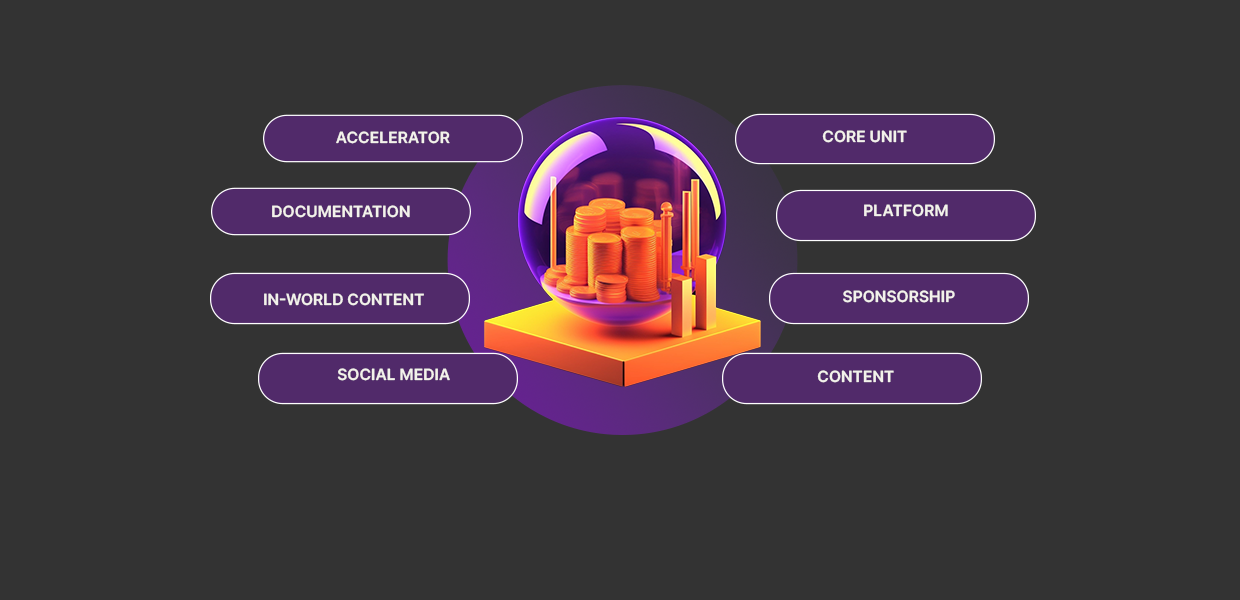
<style>
.page{position:relative;width:1240px;height:600px;background:#333333}
.page>*{position:absolute;margin:0}
.t1{font:15.4px "Inter-SemiBold";color:#f3f2eb;text-transform:uppercase}
</style>
<div class="page">
<p class="t1" style="left:336px;top:131px;width:114px;height:13px">Accelerator</p>
<p class="t1" style="left:822px;top:130px;width:85px;height:13px">Core Unit</p>
<p class="t1" style="left:272px;top:205px;width:138px;height:13px">Documentation</p>
<p class="t1" style="left:864px;top:204px;width:84px;height:13px">Platform</p>
<p class="t1" style="left:264px;top:293px;width:160px;height:13px">In-world Content</p>
<p class="t1" style="left:843px;top:290px;width:112px;height:13px">Sponsorship</p>
<p class="t1" style="left:337px;top:368px;width:113px;height:13px">Social Media</p>
<p class="t1" style="left:817px;top:370px;width:77px;height:13px">Content</p>
</div>
